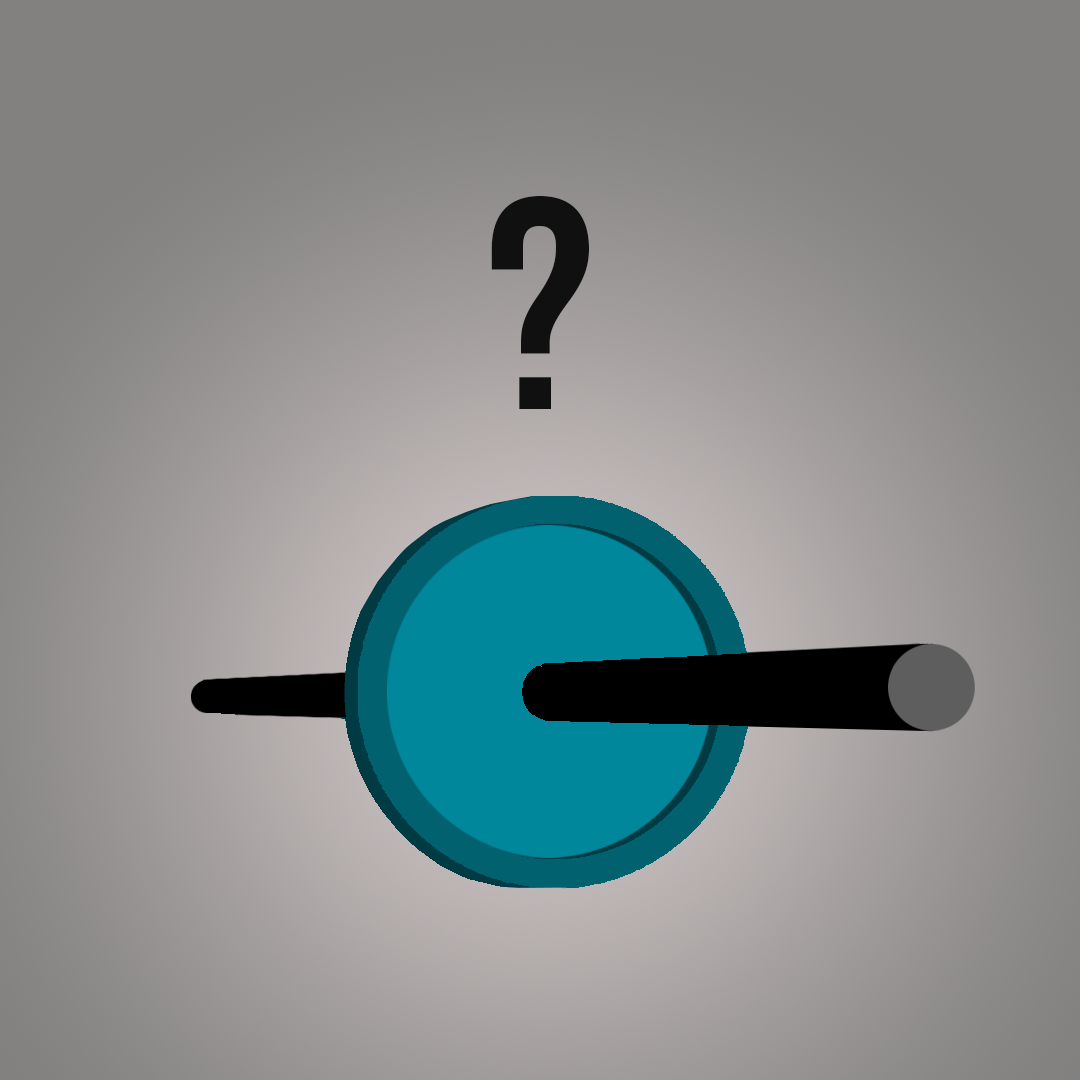
<style>
.page{position:relative;width:1080px;height:1080px}
.page>*{position:absolute;margin:0}
.t1{font:300px "BebasNeue-Regular";color:#101010}
</style>
<div class="page">
<p class="t1" style="left:491px;top:196px;width:98px;height:213px">?</p>
</div>
